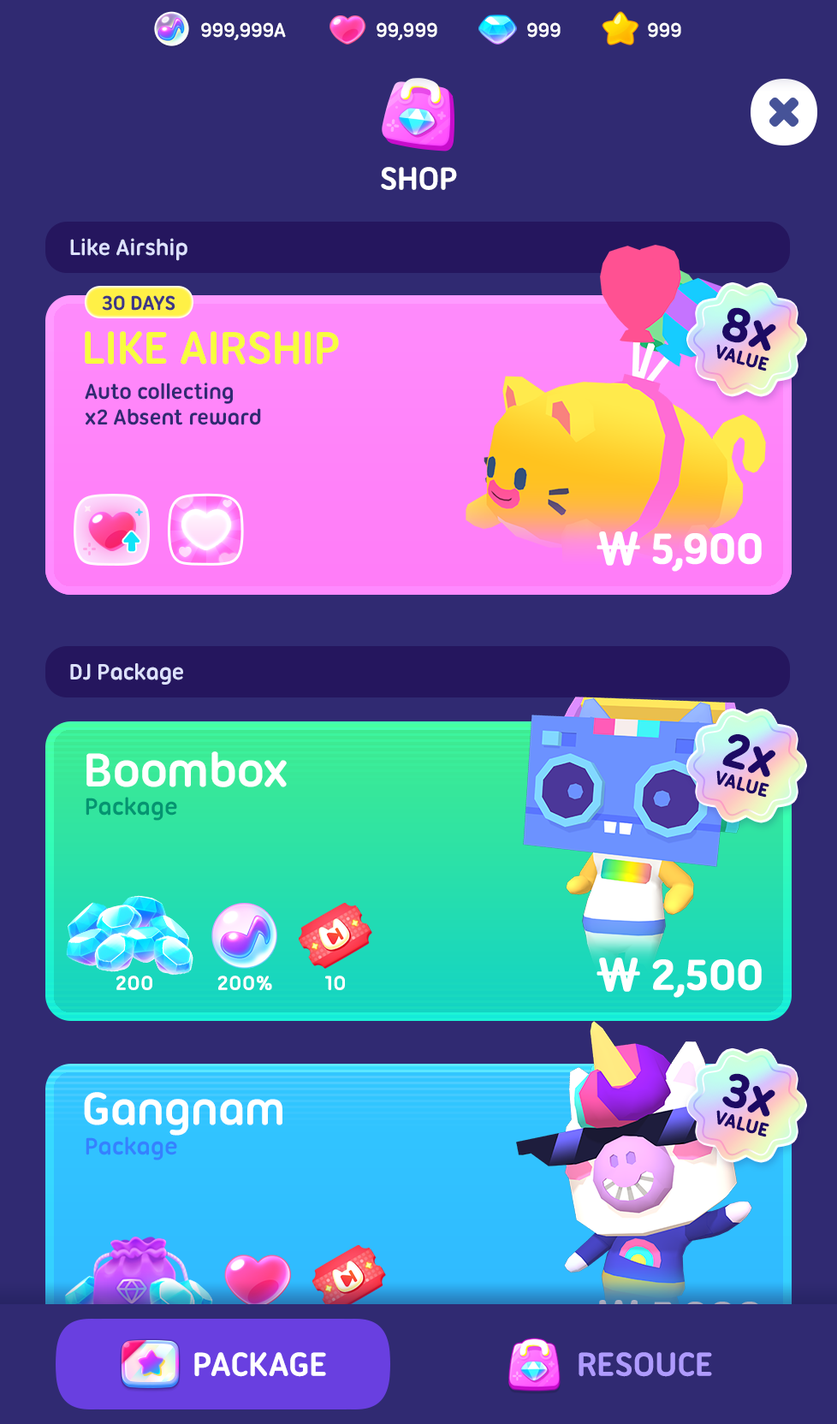
<style>
.page{position:relative;width:837px;height:1424px;background:#302a72}
.page>*{position:absolute;margin:0}
.t1{font:21.4px "UbuntuTitling-Bold";letter-spacing:-0.025em;color:#ffffff}
.t2{font:34.2px "UbuntuTitling-Bold";letter-spacing:-0.025em;color:#ffffff;text-transform:uppercase}
.t3{font:24px "UbuntuTitling-Bold";letter-spacing:-0.025em;color:#dde1ff}
.t4{font:21.5px "UbuntuTitling-Bold";letter-spacing:-0.025em;color:#3d3787;text-transform:uppercase}
.t5{font:49.6px "UbuntuTitling-Bold";letter-spacing:-0.025em;color:#f8fd3f;text-transform:uppercase}
.t6{font:23.1px/25.7px "UbuntuTitling-Bold";letter-spacing:-0.025em;color:#302a72}
.t7{font:46.2px "UbuntuTitling-Bold";letter-spacing:-0.04em;color:#ffffff;text-transform:uppercase;font-weight:bold}
.t8{font:46.2px "NanumSquareRoundOTFEB";letter-spacing:-0.04em;color:#ffffff;text-transform:uppercase;font-weight:bold}
.t9{font:51.4px "UbuntuTitling-Bold";letter-spacing:-0.025em;color:#ffffff}
.t10{font:25.7px "UbuntuTitling-Bold";letter-spacing:-0.025em;color:#059471}
.t11{font:21.4px "UbuntuTitling-Bold";letter-spacing:0.01em;color:#ffffff}
.t12{font:49.6px "UbuntuTitling-Bold";letter-spacing:-0.025em;color:#ffffff}
.t13{font:25.7px "UbuntuTitling-Bold";letter-spacing:-0.025em;color:#3581ff}
.t14{font:36px "UbuntuTitling-Bold";letter-spacing:-0.025em;color:#ffffff;text-transform:uppercase}
.t15{font:36px "UbuntuTitling-Bold";letter-spacing:-0.025em;color:#af9bff;text-transform:uppercase}
</style>
<div class="page">
<p class="t1" style="left:201px;top:22px;width:85px;height:18px">999,999A</p>
<p class="t1" style="left:377px;top:22px;width:60px;height:18px">99,999</p>
<p class="t1" style="left:527px;top:22px;width:34px;height:16px">999</p>
<p class="t1" style="left:648px;top:22px;width:33px;height:16px">999</p>
<p class="t2" style="left:381px;top:167px;width:76px;height:23px">Shop</p>
<p class="t3" style="left:70px;top:238px;width:117px;height:23px">Like Airship</p>
<p class="t4" style="left:102px;top:295px;width:73px;height:16px">30 days</p>
<p class="t5" style="left:85px;top:331px;width:254px;height:34px">Like Airship</p>
<p class="t6" style="left:85px;top:383px;width:176px;height:42px">Auto collecting<br>x2 Absent reward</p>
<p class="t7" style="left:597px;top:532px;width:165px;height:40px"><span class="t8">₩ </span>5,900</p>
<p class="t3" style="left:70px;top:663px;width:113px;height:22px">DJ Package</p>
<p class="t9" style="left:86px;top:752px;width:201px;height:36px">Boombox</p>
<p class="t10" style="left:86px;top:797px;width:91px;height:24px">Package</p>
<p class="t7" style="left:597px;top:958px;width:165px;height:40px"><span class="t8">₩ </span>2,500</p>
<p class="t11" style="left:116px;top:976px;width:36px;height:14px">200</p>
<p class="t11" style="left:217px;top:976px;width:55px;height:14px">200%</p>
<p class="t11" style="left:325px;top:976px;width:20px;height:14px">10</p>
<p class="t12" style="left:84px;top:1092px;width:198px;height:44px">Gangnam</p>
<p class="t13" style="left:86px;top:1137px;width:91px;height:24px">Package</p>
<p class="t14" style="left:194px;top:1352px;width:132px;height:25px">Package</p>
<p class="t15" style="left:579px;top:1352px;width:133px;height:25px">Resouce</p>
</div>
